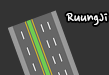
<style>
.page{position:relative;width:109px;height:75px;background:#333333}
.page>*{position:absolute;margin:0}
.t1{font:16px "NanumPen";color:#ffffff}
</style>
<div class="page">
<p class="t1" style="left:66px;top:13px;width:42px;height:12px">RuungJi</p>
</div>
